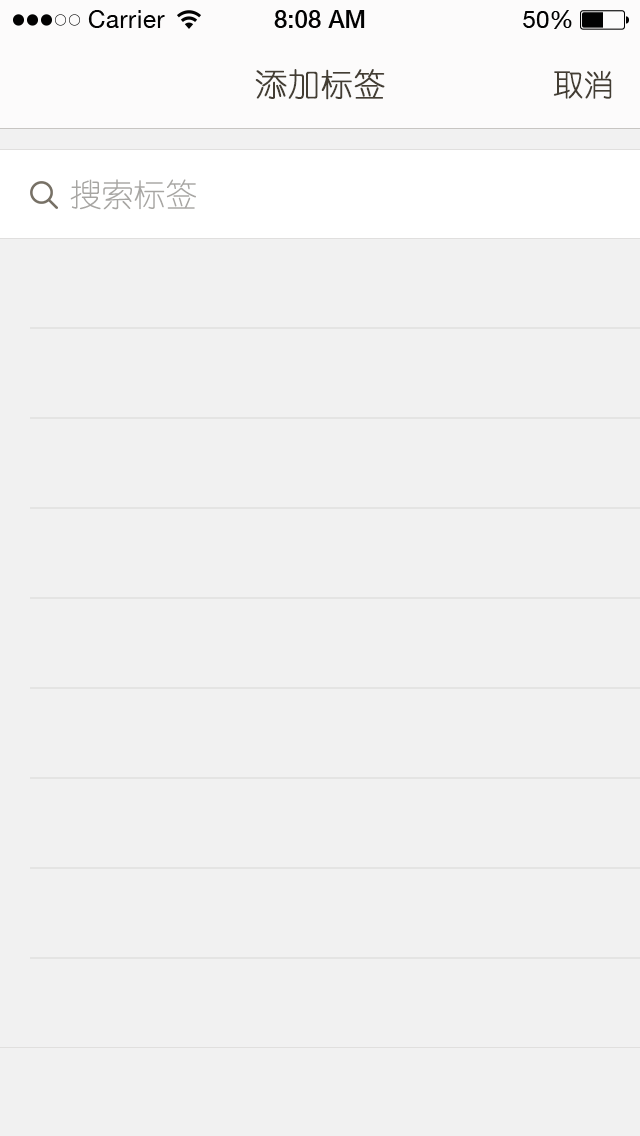
<style>
.page{position:relative;width:640px;height:1136px;background:#f1f1f1}
.page>*{position:absolute;margin:0}
.t1{font:32px "YouYuan";color:#433d33;text-transform:uppercase;font-weight:bold}
.t2{font:30px "YouYuan";color:#433d33;text-transform:uppercase;font-weight:bold}
.t3{font:32px "YouYuan";color:#a7a6a3;text-transform:uppercase}
</style>
<div class="page">
<p class="t1" style="left:255px;top:69px;width:130px;height:31px">添加标签</p>
<p class="t2" style="left:553px;top:70px;width:59px;height:29px">取消</p>
<p class="t3" style="left:70px;top:179px;width:126px;height:31px">搜索标签</p>
</div>
